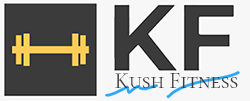
<style>
.page{position:relative;width:250px;height:101px;background:#f7f7f7}
.page>*{position:absolute;margin:0}
.t1{font:22.1px "CormorantSC-Regular";color:#3b3b3b}
</style>
<div class="page">
<p class="t1" style="left:115px;top:73px;width:123px;height:16px">Kush Fitness</p>
</div>
